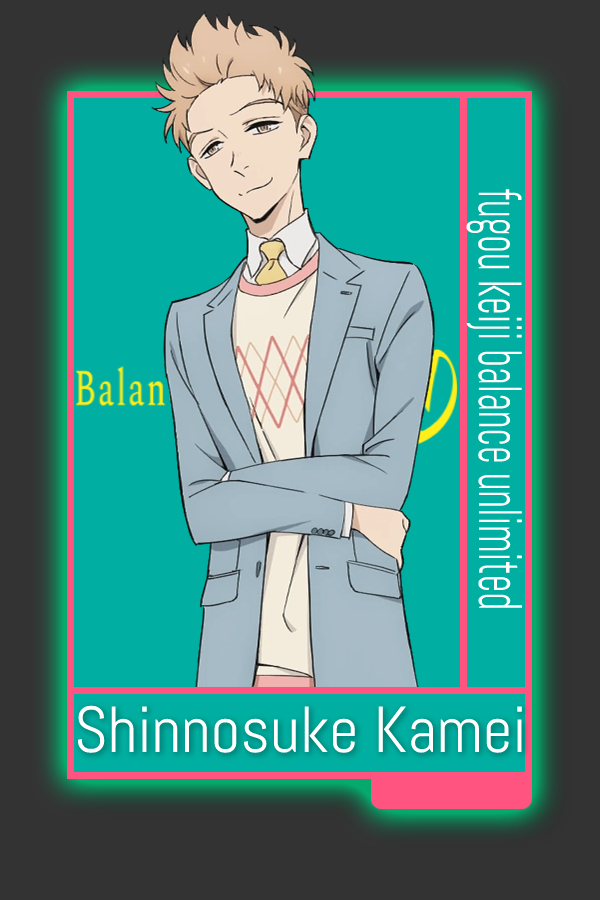
<style>
.page{position:relative;width:600px;height:900px;background:#00afa1}
.page>*{position:absolute;margin:0}
.t1{font:61.1px "Abel-Regular";color:#ffffff;scale:0.64 1}
.t2{font:65px "Abel-Regular";color:#ffffff}
</style>
<div class="page">
<p class="t1" style="left:466px;top:189px;width:56px;height:419px;rotate:90deg">fugou keiji balance unlimited</p>
<p class="t2" style="left:77px;top:705px;width:445px;height:48px">Shinnosuke Kamei</p>
</div>
